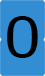
<style>
.page{position:relative;width:45px;height:76px;background:#328dd3}
.page>*{position:absolute;margin:0}
.t1{font:54.7px "Verdana";color:#000000;scale:1.12 1}
</style>
<div class="page">
<p class="t1" style="left:7px;top:16px;width:31px;height:42px">0</p>
</div>
